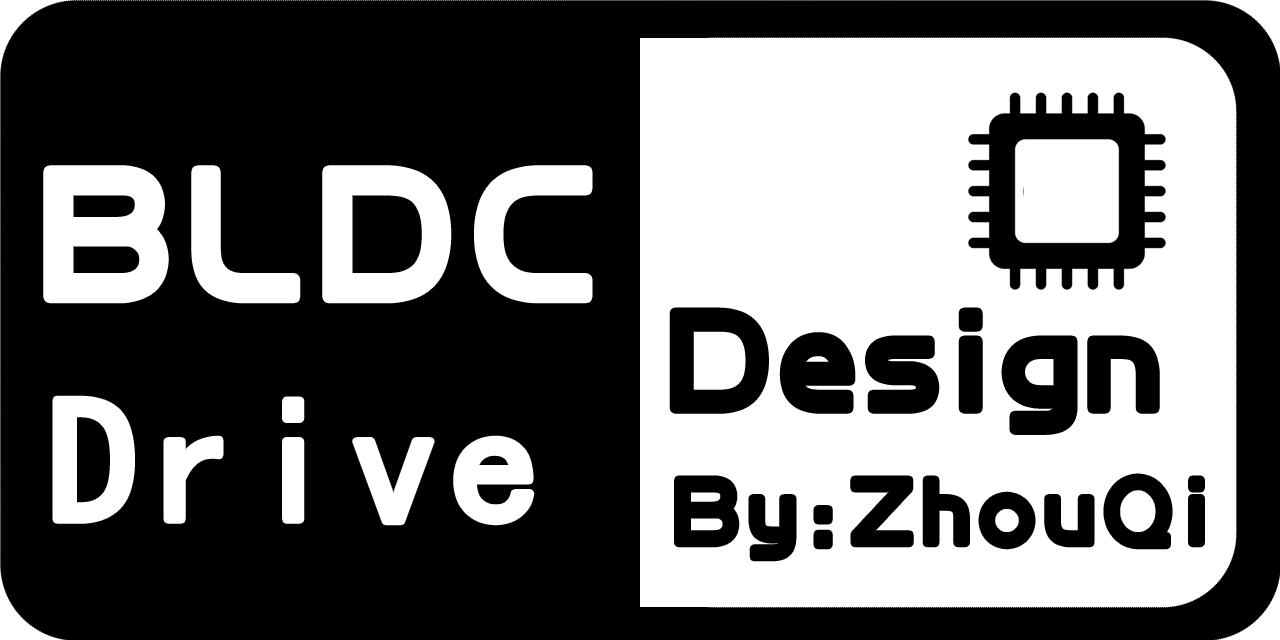
<style>
.page{position:relative;width:1280px;height:640px;background:#000000}
.page>*{position:absolute;margin:0}
.t1{font:191.7px "BDZYJT--GB1-0";letter-spacing:0.12em;color:#ffffff}
.t2{font:146px "BDZYJT--GB1-0";letter-spacing:0.06em;color:#000000;font-weight:bold}
.t3{font:179.2px "SimHei";letter-spacing:0.06em;color:#ffffff}
.t4{font:97.3px "BDZYJT--GB1-0";letter-spacing:0.12em;color:#000000}
</style>
<div class="page">
<p class="t1" style="left:49px;top:171px;width:538px;height:127px">BLDC</p>
<p class="t2" style="left:674px;top:312px;width:481px;height:118px">Design</p>
<p class="t3" style="left:56px;top:399px;width:475px;height:123px">Drive</p>
<p class="t4" style="left:678px;top:477px;width:523px;height:81px">By:ZhouQi</p>
</div>
